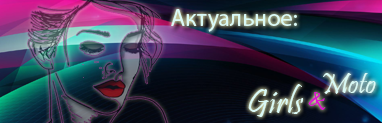
<style>
.page{position:relative;width:382px;height:123px}
.page>*{position:absolute;margin:0}
.t1{font:24px "MyriadPro-Regular";color:#d9f8f5}
.t2{font:30px "Pristina-Regular";color:#d9f8f5}
.t3{font:36px "Pristina-Regular";color:#d9f8f5}
.t4{font:24px "Pristina-Regular";color:#dc17d0}
</style>
<div class="page">
<p class="t1" style="left:171px;top:9px;width:126px;height:23px">Актуальное:</p>
<p class="t2" style="left:323px;top:73px;width:53px;height:21px">Moto</p>
<p class="t3" style="left:248px;top:84px;width:56px;height:33px">Girls</p>
<p class="t4" style="left:308px;top:92px;width:18px;height:18px">&amp;</p>
</div>
